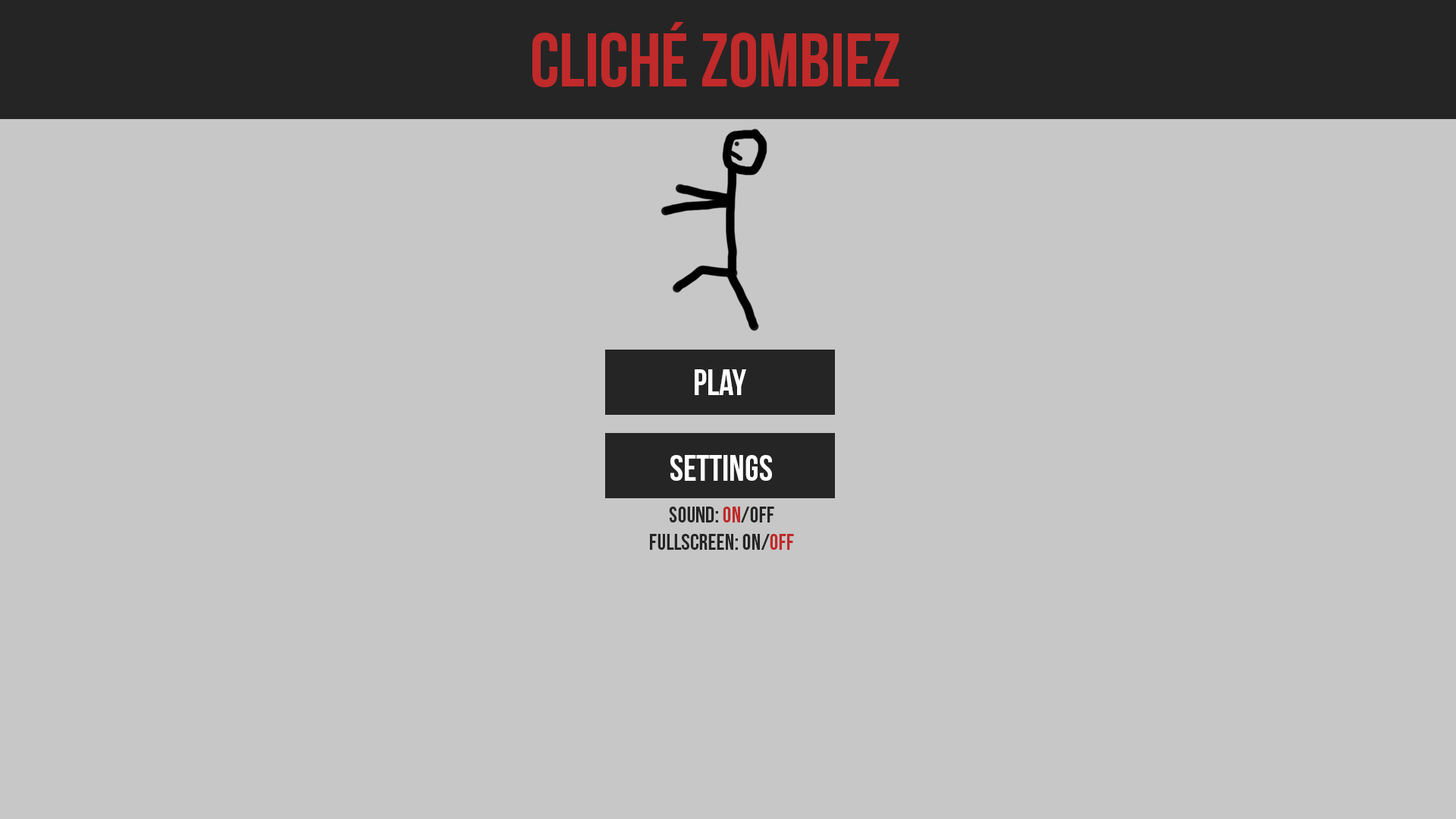
<style>
.page{position:relative;width:1456px;height:819px;background:#c7c7c7}
.page>*{position:absolute;margin:0}
.t1{font:75.8px "BebasNeue";color:#c02a2a}
.t2{font:36.4px "BebasNeue";color:#ffffff}
.t3{font:22.7px "BebasNeue";color:#252525}
.t4{font:22.7px "BebasNeue";color:#c02a2a}
</style>
<div class="page">
<p class="t1" style="left:532px;top:22px;width:367px;height:65px">Cliché zombiez</p>
<p class="t2" style="left:695px;top:369px;width:51px;height:26px">play</p>
<p class="t2" style="left:670px;top:455px;width:102px;height:26px">settings</p>
<p class="t3" style="left:669px;top:507px;width:105px;height:15px">sound: <span class="t4">on</span>/off</p>
<p class="t3" style="left:650px;top:534px;width:144px;height:16px">fullscreen: on/<span class="t4">off</span></p>
</div>
